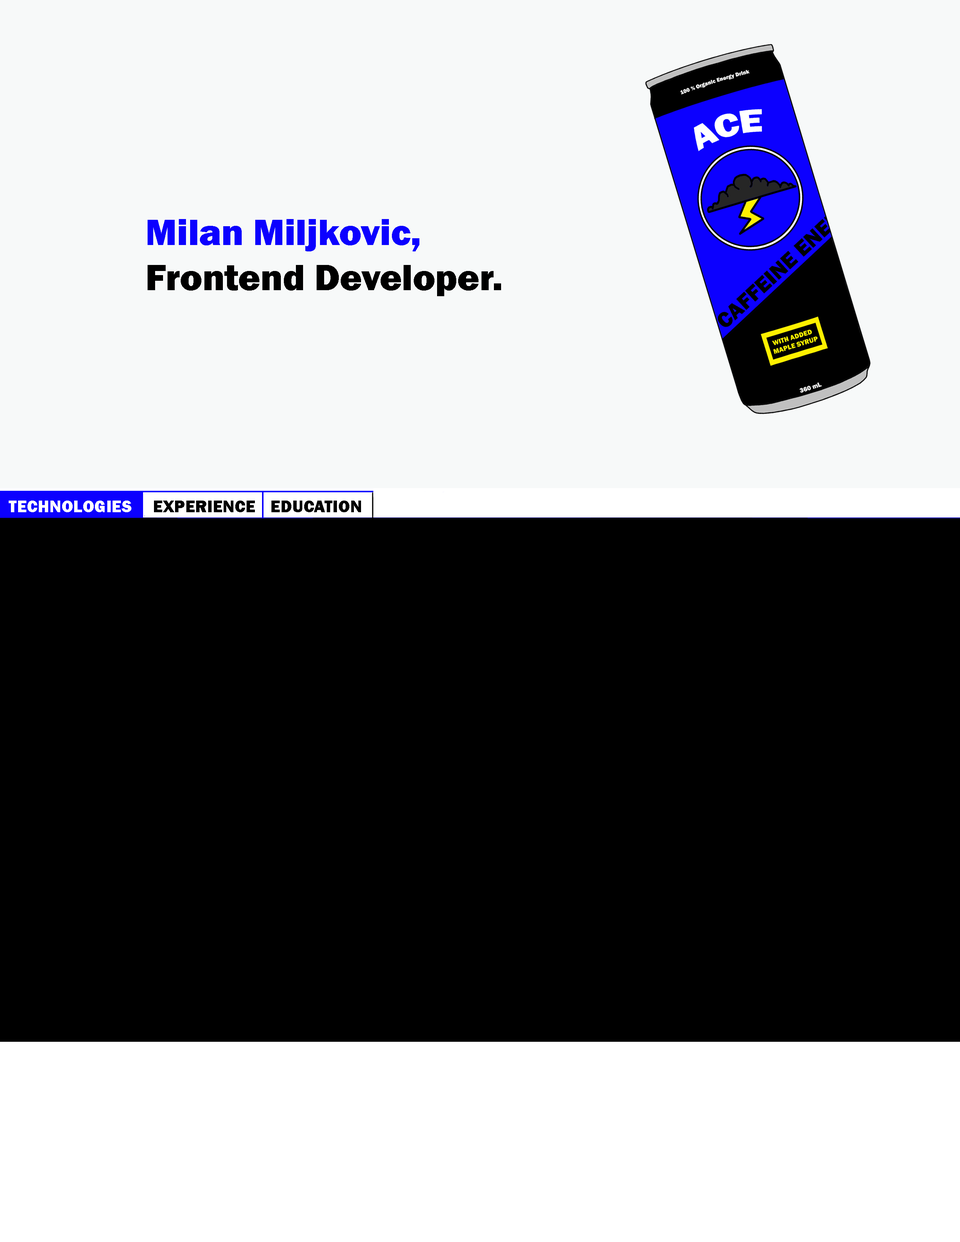
<style>
.page{position:relative;width:960px;height:1242px;background:#000000}
.page>*{position:absolute;margin:0}
.t1{font:37.6px "FranklinGothic-Heavy";color:#000000}
.t2{font:37.6px "FranklinGothic-Heavy";color:#0c00ff}
.t3{font:17.3px "FranklinGothic-Heavy";color:#000000}
.t4{font:17.3px "FranklinGothic-Heavy";color:#ffffff}
</style>
<div class="page">
<p class="t1" style="left:148px;top:219px;width:353px;height:77px"><span class="t2">Milan Miljkovic,<br></span>Frontend Developer.</p>
<p class="t3" style="left:9px;top:501px;width:352px;height:11px"><span class="t4">TECHNOLOGIES</span>   EXPERIENCE  EDUCATION</p>
</div>
